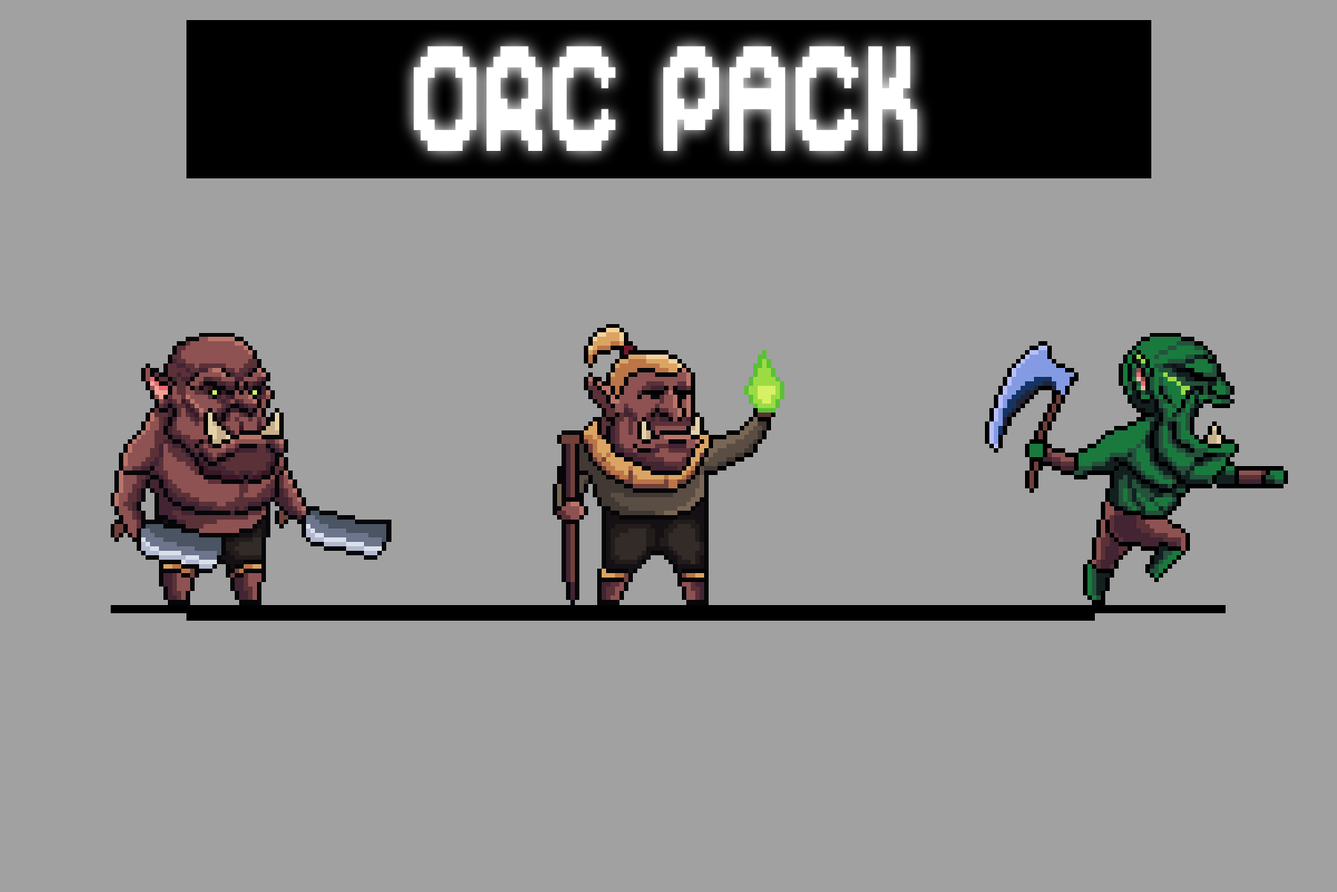
<style>
.page{position:relative;width:1337px;height:892px;background:#a1a1a1}
.page>*{position:absolute;margin:0}
.t1{font:167.2px "DigitalDisco";letter-spacing:0.03em;color:#ffffff;scale:0.67 1}
</style>
<div class="page">
<p class="t1" style="left:414px;top:46px;width:504px;height:105px">ORC PACK</p>
</div>
